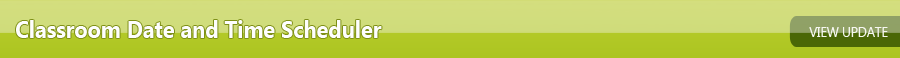
<style>
.page{position:relative;width:900px;height:58px}
.page>*{position:absolute;margin:0}
.t1{font:24px "SegoeUI-Bold";color:#fefefe;scale:0.9 1}
.t2{font:14px "SegoeUI";color:#f6f7f1;scale:0.9 1}
</style>
<div class="page">
<p class="t1" style="left:16px;top:20px;width:366px;height:18px">Classroom Date and Time Scheduler</p>
<p class="t2" style="left:809px;top:27px;width:79px;height:10px">VIEW UPDATE</p>
</div>
